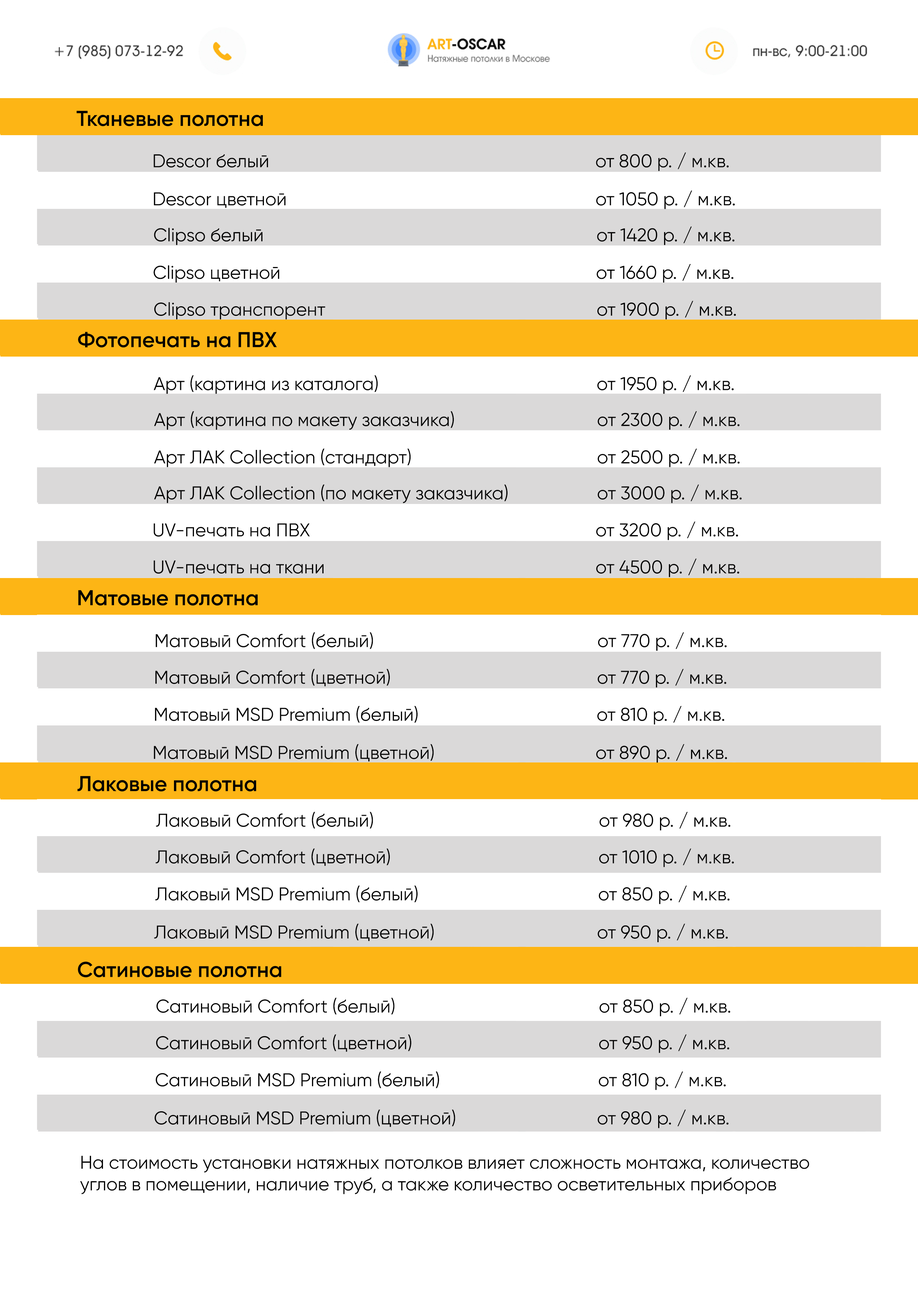
<style>
.page{position:relative;width:918px;height:1299px;background:#ffffff}
.page>*{position:absolute;margin:0}
.t1{font:21.6px "Gilroy-SemiBold";color:#000000}
.t2{font:18.5px "Gilroy-Regular";color:#000000}
.t3{font:18.5px/21.6px "Gilroy-Regular";color:#000000}
</style>
<div class="page">
<p class="t1" style="left:77px;top:111px;width:186px;height:15px">Тканевые полотна</p>
<p class="t2" style="left:154px;top:154px;width:114px;height:14px">Descor белый</p>
<p class="t2" style="left:596px;top:152px;width:133px;height:19px">от 800 р. / м.кв.</p>
<p class="t2" style="left:154px;top:192px;width:132px;height:16px">Descor цветной</p>
<p class="t2" style="left:596px;top:190px;width:139px;height:19px">от 1050 р. / м.кв.</p>
<p class="t2" style="left:154px;top:228px;width:108px;height:17px">Clipso белый</p>
<p class="t2" style="left:597px;top:226px;width:138px;height:19px">от 1420 р. / м.кв.</p>
<p class="t2" style="left:154px;top:265px;width:126px;height:17px">Clipso цветной</p>
<p class="t2" style="left:597px;top:264px;width:137px;height:18px">от 1660 р. / м.кв.</p>
<p class="t2" style="left:154px;top:302px;width:171px;height:18px">Clipso транспорент</p>
<p class="t2" style="left:597px;top:301px;width:139px;height:19px">от 1900 р. / м.кв.</p>
<p class="t1" style="left:78px;top:332px;width:199px;height:16px">Фотопечать на ПВХ</p>
<p class="t2" style="left:154px;top:375px;width:224px;height:19px">Арт (картина из каталога)</p>
<p class="t2" style="left:597px;top:375px;width:137px;height:19px">от 1950 р. / м.кв.</p>
<p class="t2" style="left:154px;top:411px;width:300px;height:19px">Арт (картина по макету заказчика)</p>
<p class="t2" style="left:598px;top:411px;width:142px;height:19px">от 2300 р. / м.кв.</p>
<p class="t2" style="left:154px;top:448px;width:257px;height:19px">Арт ЛАК Collection (стандарт)</p>
<p class="t2" style="left:598px;top:448px;width:142px;height:19px">от 2500 р. / м.кв.</p>
<p class="t2" style="left:154px;top:484px;width:354px;height:19px">Арт ЛАК Collection (по макету заказчика)</p>
<p class="t2" style="left:598px;top:484px;width:144px;height:19px">от 3000 р. / м.кв.</p>
<p class="t2" style="left:596px;top:521px;width:142px;height:19px">от 3200 р. / м.кв.</p>
<p class="t2" style="left:154px;top:523px;width:156px;height:13px">UV-печать на ПВХ</p>
<p class="t2" style="left:154px;top:560px;width:170px;height:13px">UV-печать на ткани</p>
<p class="t2" style="left:596px;top:558px;width:143px;height:19px">от 4500 р. / м.кв.</p>
<p class="t1" style="left:78px;top:590px;width:180px;height:16px">Матовые полотна</p>
<p class="t2" style="left:155px;top:632px;width:218px;height:17px">Матовый Comfort (белый)</p>
<p class="t2" style="left:598px;top:632px;width:129px;height:19px">от 770 р. / м.кв.</p>
<p class="t2" style="left:155px;top:669px;width:235px;height:17px">Матовый Comfort (цветной)</p>
<p class="t2" style="left:598px;top:669px;width:128px;height:19px">от 770 р. / м.кв.</p>
<p class="t2" style="left:155px;top:706px;width:263px;height:17px">Матовый MSD Premium (белый)</p>
<p class="t2" style="left:597px;top:706px;width:128px;height:19px">от 810 р. / м.кв.</p>
<p class="t2" style="left:154px;top:744px;width:280px;height:18px">Матовый MSD Premium (цветной)</p>
<p class="t2" style="left:596px;top:744px;width:131px;height:19px">от 890 р. / м.кв.</p>
<p class="t1" style="left:77px;top:776px;width:179px;height:16px">Лаковые полотна</p>
<p class="t2" style="left:156px;top:812px;width:217px;height:17px">Лаковый Comfort (белый)</p>
<p class="t2" style="left:599px;top:812px;width:131px;height:18px">от 980 р. / м.кв.</p>
<p class="t2" style="left:155px;top:848px;width:235px;height:18px">Лаковый Comfort (цветной)</p>
<p class="t2" style="left:599px;top:848px;width:135px;height:19px">от 1010 р. / м.кв.</p>
<p class="t2" style="left:155px;top:885px;width:263px;height:17px">Лаковый MSD Premium (белый)</p>
<p class="t2" style="left:599px;top:885px;width:131px;height:19px">от 850 р. / м.кв.</p>
<p class="t2" style="left:154px;top:923px;width:280px;height:18px">Лаковый MSD Premium (цветной)</p>
<p class="t2" style="left:598px;top:923px;width:130px;height:19px">от 950 р. / м.кв.</p>
<p class="t1" style="left:78px;top:961px;width:203px;height:16px">Сатиновые полотна</p>
<p class="t2" style="left:156px;top:997px;width:239px;height:17px">Сатиновый Comfort (белый)</p>
<p class="t2" style="left:599px;top:997px;width:131px;height:19px">от 850 р. / м.кв.</p>
<p class="t2" style="left:156px;top:1034px;width:255px;height:18px">Сатиновый Comfort (цветной)</p>
<p class="t2" style="left:599px;top:1034px;width:130px;height:19px">от 950 р. / м.кв.</p>
<p class="t2" style="left:155px;top:1071px;width:284px;height:17px">Сатиновый MSD Premium (белый)</p>
<p class="t2" style="left:599px;top:1071px;width:127px;height:19px">от 810 р. / м.кв.</p>
<p class="t2" style="left:154px;top:1109px;width:301px;height:18px">Сатиновый MSD Premium (цветной)</p>
<p class="t2" style="left:598px;top:1109px;width:131px;height:19px">от 980 р. / м.кв.</p>
<p class="t3" style="left:80px;top:1155px;width:729px;height:39px">На стоимость установки натяжных потолков влияет сложность монтажа, количество <br>углов в помещении, наличие труб, а также количество осветительных приборов</p>
</div>
